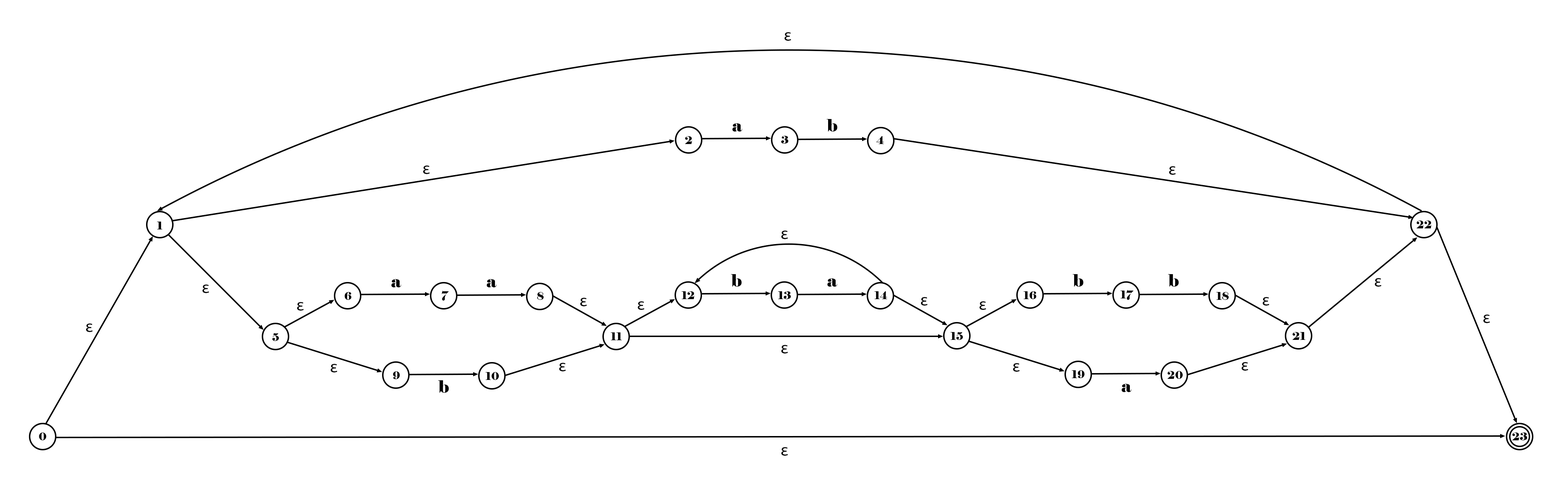
<style>
.page{position:relative;width:1568px;height:490px;background:#ffffff}
.page>*{position:absolute;margin:0}
.t1{font:17.1px "MyriadPro-Regular";color:#000000}
.t2{font:17.1px "Elephant-Regular";color:#000000}
.t3{font:10.7px "Elephant-Regular";color:#000000}
</style>
<div class="page">
<p class="t1" style="left:785px;top:32px;width:6px;height:9px">ε</p>
<p class="t2" style="left:732px;top:123px;width:10px;height:8px">a</p>
<p class="t2" style="left:827px;top:119px;width:10px;height:12px">b</p>
<p class="t3" style="left:685px;top:136px;width:7px;height:8px">2</p>
<p class="t3" style="left:781px;top:136px;width:7px;height:8px">3</p>
<p class="t3" style="left:876px;top:136px;width:8px;height:8px">4</p>
<p class="t1" style="left:423px;top:165px;width:7px;height:9px">ε</p>
<p class="t1" style="left:1169px;top:166px;width:7px;height:9px">ε</p>
<p class="t3" style="left:157px;top:221px;width:5px;height:8px">1</p>
<p class="t3" style="left:1416px;top:220px;width:16px;height:8px">22</p>
<p class="t1" style="left:781px;top:230px;width:7px;height:9px">ε</p>
<p class="t2" style="left:391px;top:279px;width:10px;height:8px">a</p>
<p class="t2" style="left:487px;top:279px;width:10px;height:8px">a</p>
<p class="t2" style="left:731px;top:274px;width:11px;height:12px">b</p>
<p class="t2" style="left:827px;top:278px;width:10px;height:8px">a</p>
<p class="t2" style="left:1073px;top:274px;width:10px;height:12px">b</p>
<p class="t2" style="left:1168px;top:274px;width:11px;height:12px">b</p>
<p class="t1" style="left:1375px;top:278px;width:7px;height:8px">ε</p>
<p class="t1" style="left:202px;top:284px;width:7px;height:9px">ε</p>
<p class="t3" style="left:345px;top:292px;width:6px;height:8px">6</p>
<p class="t3" style="left:441px;top:290px;width:8px;height:10px">7</p>
<p class="t3" style="left:537px;top:292px;width:7px;height:8px">8</p>
<p class="t3" style="left:681px;top:291px;width:14px;height:8px">12</p>
<p class="t3" style="left:778px;top:291px;width:13px;height:8px">13</p>
<p class="t3" style="left:874px;top:291px;width:13px;height:8px">14</p>
<p class="t3" style="left:1023px;top:291px;width:13px;height:8px">16</p>
<p class="t3" style="left:1120px;top:290px;width:14px;height:10px">17</p>
<p class="t3" style="left:1216px;top:292px;width:13px;height:8px">18</p>
<p class="t1" style="left:297px;top:302px;width:7px;height:8px">ε</p>
<p class="t1" style="left:580px;top:297px;width:7px;height:9px">ε</p>
<p class="t1" style="left:638px;top:301px;width:7px;height:9px">ε</p>
<p class="t1" style="left:921px;top:297px;width:7px;height:8px">ε</p>
<p class="t1" style="left:980px;top:301px;width:6px;height:9px">ε</p>
<p class="t1" style="left:1263px;top:297px;width:6px;height:8px">ε</p>
<p class="t1" style="left:1483px;top:314px;width:7px;height:9px">ε</p>
<p class="t1" style="left:86px;top:323px;width:7px;height:9px">ε</p>
<p class="t3" style="left:272px;top:333px;width:7px;height:8px">5</p>
<p class="t3" style="left:611px;top:332px;width:11px;height:8px">11</p>
<p class="t3" style="left:950px;top:332px;width:13px;height:8px">15</p>
<p class="t3" style="left:1292px;top:332px;width:14px;height:8px">21</p>
<p class="t1" style="left:781px;top:345px;width:7px;height:8px">ε</p>
<p class="t1" style="left:331px;top:364px;width:6px;height:8px">ε</p>
<p class="t1" style="left:559px;top:362px;width:7px;height:9px">ε</p>
<p class="t1" style="left:1013px;top:363px;width:7px;height:8px">ε</p>
<p class="t1" style="left:1242px;top:362px;width:6px;height:8px">ε</p>
<p class="t3" style="left:393px;top:371px;width:7px;height:8px">9</p>
<p class="t3" style="left:485px;top:372px;width:14px;height:8px">10</p>
<p class="t3" style="left:1072px;top:370px;width:12px;height:8px">19</p>
<p class="t3" style="left:1167px;top:371px;width:16px;height:8px">20</p>
<p class="t2" style="left:438px;top:380px;width:11px;height:12px">b</p>
<p class="t2" style="left:1122px;top:384px;width:10px;height:8px">a</p>
<p class="t3" style="left:39px;top:432px;width:7px;height:8px">0</p>
<p class="t3" style="left:1512px;top:432px;width:15px;height:8px">23</p>
<p class="t1" style="left:781px;top:447px;width:7px;height:8px">ε</p>
</div>
